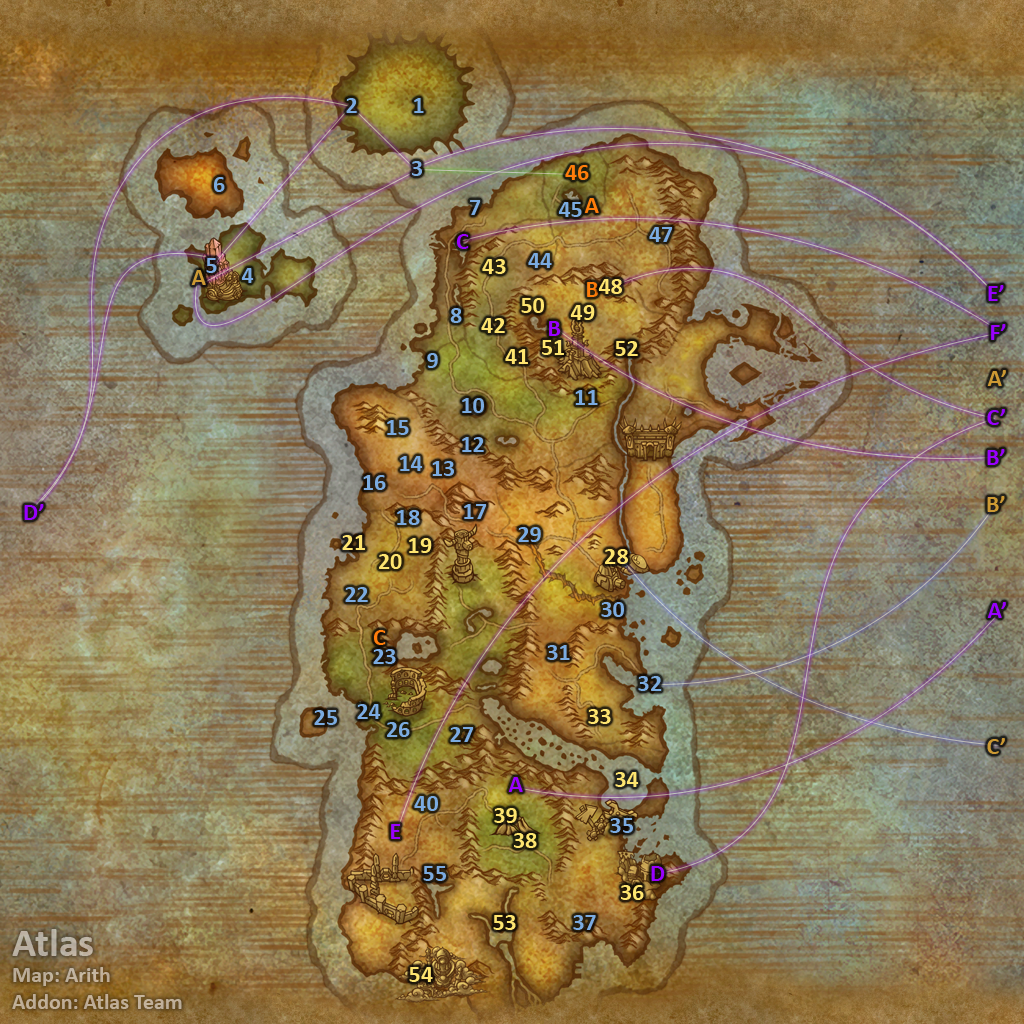
<style>
.page{position:relative;width:1024px;height:1024px}
.page>*{position:absolute;margin:0}
.t1{font:24px "Calibri-Bold";color:#7babe0}
.t2{font:24px "Calibri-Bold";color:#ff7d0a}
.t3{font:24px "Calibri-Bold";color:#9900ff}
.t4{font:24px "Calibri-Bold";color:#cc9933}
.t5{font:24px "Calibri-Bold";color:#fee570}
.t6{font:22px "Calibri-Bold";color:#bdaf9c}
.t7{font:40px "Calibri-Bold";color:#bdaf9c}
</style>
<div class="page">
<p class="t1" style="left:346px;top:98px;width:11px;height:15px">2</p>
<p class="t1" style="left:414px;top:98px;width:10px;height:15px">1</p>
<p class="t1" style="left:412px;top:161px;width:10px;height:15px">3</p>
<p class="t2" style="left:565px;top:165px;width:24px;height:15px">46</p>
<p class="t1" style="left:214px;top:177px;width:11px;height:15px">6</p>
<p class="t2" style="left:584px;top:198px;width:15px;height:15px">A</p>
<p class="t1" style="left:470px;top:200px;width:11px;height:15px">7</p>
<p class="t1" style="left:558px;top:202px;width:24px;height:15px">45</p>
<p class="t1" style="left:649px;top:227px;width:24px;height:15px">47</p>
<p class="t3" style="left:457px;top:234px;width:12px;height:15px">C</p>
<p class="t1" style="left:528px;top:253px;width:24px;height:15px">44</p>
<p class="t4" style="left:191px;top:270px;width:15px;height:15px">A</p>
<p class="t1" style="left:206px;top:258px;width:11px;height:15px">5</p>
<p class="t1" style="left:241px;top:268px;width:13px;height:15px">4</p>
<p class="t5" style="left:482px;top:259px;width:24px;height:15px">43</p>
<p class="t5" style="left:598px;top:279px;width:24px;height:15px">48</p>
<p class="t2" style="left:587px;top:282px;width:12px;height:15px">B</p>
<p class="t3" style="left:988px;top:285px;width:16px;height:16px">E’</p>
<p class="t5" style="left:521px;top:298px;width:23px;height:15px">50</p>
<p class="t5" style="left:570px;top:305px;width:25px;height:15px">49</p>
<p class="t1" style="left:450px;top:308px;width:12px;height:15px">8</p>
<p class="t5" style="left:481px;top:318px;width:24px;height:15px">42</p>
<p class="t3" style="left:549px;top:321px;width:12px;height:15px">B</p>
<p class="t3" style="left:991px;top:324px;width:15px;height:16px">F’</p>
<p class="t5" style="left:542px;top:340px;width:22px;height:15px">51</p>
<p class="t5" style="left:615px;top:341px;width:23px;height:15px">52</p>
<p class="t1" style="left:427px;top:353px;width:11px;height:15px">9</p>
<p class="t5" style="left:505px;top:349px;width:23px;height:15px">41</p>
<p class="t4" style="left:987px;top:370px;width:19px;height:16px">A’</p>
<p class="t1" style="left:575px;top:390px;width:23px;height:15px">11</p>
<p class="t1" style="left:462px;top:398px;width:22px;height:15px">10</p>
<p class="t3" style="left:987px;top:409px;width:18px;height:16px">C’</p>
<p class="t1" style="left:387px;top:420px;width:22px;height:15px">15</p>
<p class="t1" style="left:462px;top:437px;width:22px;height:15px">12</p>
<p class="t3" style="left:987px;top:449px;width:18px;height:16px">B’</p>
<p class="t1" style="left:400px;top:456px;width:23px;height:15px">14</p>
<p class="t1" style="left:432px;top:461px;width:22px;height:15px">13</p>
<p class="t1" style="left:363px;top:475px;width:23px;height:15px">16</p>
<p class="t4" style="left:987px;top:496px;width:18px;height:16px">B’</p>
<p class="t3" style="left:24px;top:504px;width:20px;height:16px">D’</p>
<p class="t1" style="left:397px;top:510px;width:23px;height:15px">18</p>
<p class="t1" style="left:464px;top:504px;width:23px;height:15px">17</p>
<p class="t1" style="left:518px;top:527px;width:23px;height:15px">29</p>
<p class="t5" style="left:342px;top:535px;width:23px;height:15px">21</p>
<p class="t5" style="left:409px;top:538px;width:23px;height:15px">19</p>
<p class="t5" style="left:379px;top:554px;width:23px;height:15px">20</p>
<p class="t5" style="left:605px;top:549px;width:23px;height:15px">28</p>
<p class="t1" style="left:345px;top:587px;width:23px;height:15px">22</p>
<p class="t1" style="left:601px;top:602px;width:23px;height:15px">30</p>
<p class="t3" style="left:987px;top:602px;width:19px;height:16px">A’</p>
<p class="t2" style="left:374px;top:630px;width:12px;height:15px">C</p>
<p class="t1" style="left:373px;top:649px;width:23px;height:15px">23</p>
<p class="t1" style="left:547px;top:645px;width:23px;height:15px">31</p>
<p class="t1" style="left:638px;top:676px;width:24px;height:15px">32</p>
<p class="t1" style="left:314px;top:710px;width:23px;height:15px">25</p>
<p class="t1" style="left:357px;top:704px;width:24px;height:15px">24</p>
<p class="t5" style="left:588px;top:709px;width:23px;height:15px">33</p>
<p class="t1" style="left:387px;top:722px;width:23px;height:15px">26</p>
<p class="t1" style="left:450px;top:727px;width:24px;height:15px">27</p>
<p class="t4" style="left:987px;top:738px;width:18px;height:16px">C’</p>
<p class="t5" style="left:615px;top:772px;width:24px;height:15px">34</p>
<p class="t3" style="left:508px;top:777px;width:15px;height:15px">A</p>
<p class="t1" style="left:414px;top:796px;width:24px;height:15px">40</p>
<p class="t5" style="left:494px;top:808px;width:23px;height:15px">39</p>
<p class="t1" style="left:610px;top:818px;width:23px;height:15px">35</p>
<p class="t3" style="left:391px;top:824px;width:10px;height:15px">E</p>
<p class="t5" style="left:514px;top:833px;width:23px;height:15px">38</p>
<p class="t1" style="left:423px;top:866px;width:23px;height:15px">55</p>
<p class="t3" style="left:651px;top:866px;width:14px;height:15px">D</p>
<p class="t5" style="left:621px;top:885px;width:23px;height:15px">36</p>
<p class="t5" style="left:493px;top:915px;width:23px;height:15px">53</p>
<p class="t1" style="left:573px;top:915px;width:23px;height:15px">37</p>
<p class="t6" style="left:12px;top:929px;width:170px;height:80px"><span class="t7">Atlas<br></span>Map: Arith<br>Addon: Atlas Team</p>
<p class="t5" style="left:409px;top:967px;width:24px;height:15px">54</p>
</div>
